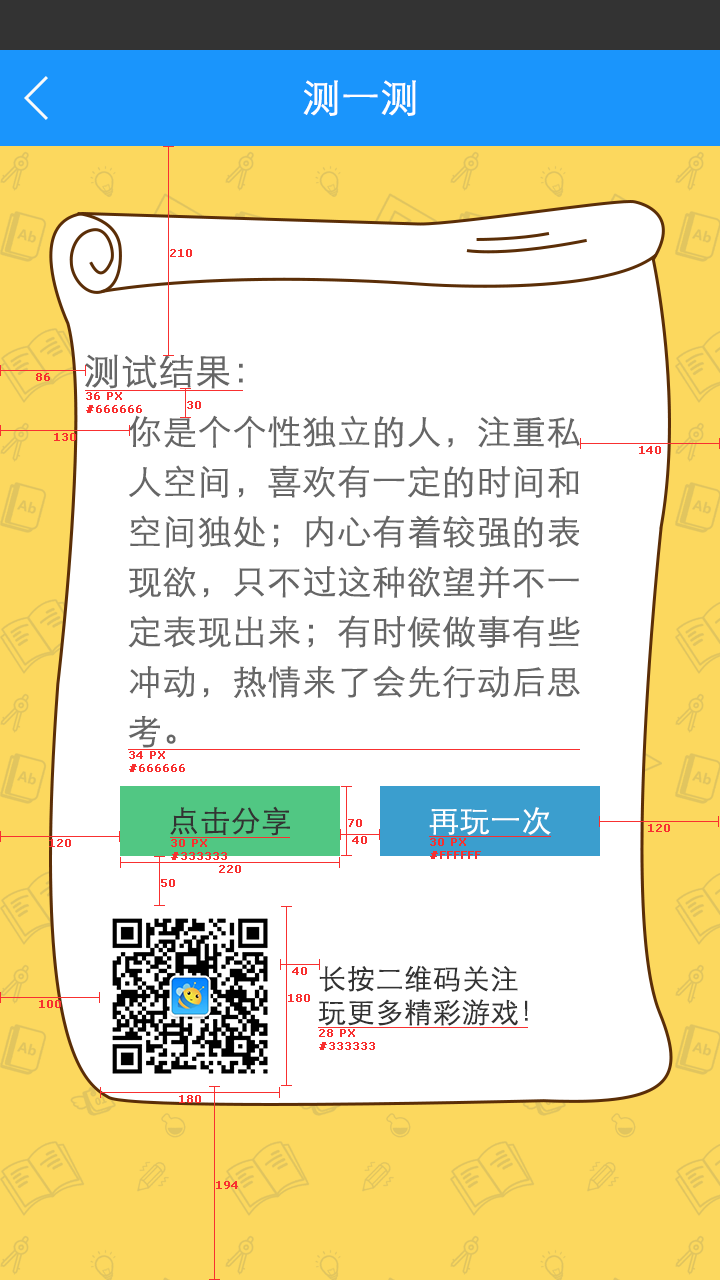
<style>
.page{position:relative;width:720px;height:1280px;background:#ffffff}
.page>*{position:absolute;margin:0}
.t1{font:38px "STXihei";color:#ffffff;font-weight:bold}
.t2{font:11px "Verdana";color:#f83030;font-weight:bold}
.t3{font:36px "STXihei";color:#666666;font-weight:bold}
.t4{font:34px/50px "STXihei";color:#666666;font-weight:bold}
.t5{font:30px "STXihei";color:#333333;font-weight:bold}
.t6{font:30px "STXihei";color:#ffffff;font-weight:bold}
.t7{font:28px "STXihei";color:#333333;font-weight:bold}
</style>
<div class="page">
<p class="t1" style="left:303px;top:80px;width:113px;height:36px">测一测</p>
<p class="t2" style="left:170px;top:249px;width:22px;height:8px">210</p>
<p class="t3" style="left:85px;top:354px;width:158px;height:35px">测试结果：</p>
<p class="t2" style="left:36px;top:373px;width:14px;height:8px">86</p>
<p class="t2" style="left:86px;top:392px;width:56px;height:21px">36 PX<br>#666666</p>
<p class="t2" style="left:187px;top:401px;width:14px;height:8px">30</p>
<p class="t4" style="left:128px;top:415px;width:452px;height:333px">你是个个性独立的人，注重私<br>人空间，喜欢有一定的时间和<br>空间独处；内心有着较强的表<br>现欲，只不过这种欲望并不一<br>定表现出来；有时候做事有些<br>冲动，热情来了会先行动后思<br>考。</p>
<p class="t2" style="left:54px;top:433px;width:22px;height:8px">130</p>
<p class="t2" style="left:639px;top:446px;width:22px;height:8px">140</p>
<p class="t2" style="left:129px;top:751px;width:56px;height:21px">34 PX<br>#666666</p>
<p class="t5" style="left:170px;top:806px;width:120px;height:30px">点击分享</p>
<p class="t6" style="left:429px;top:807px;width:122px;height:28px">再玩一次</p>
<p class="t2" style="left:348px;top:819px;width:14px;height:8px">70</p>
<p class="t2" style="left:648px;top:824px;width:22px;height:8px">120</p>
<p class="t2" style="left:49px;top:839px;width:22px;height:8px">120</p>
<p class="t2" style="left:171px;top:839px;width:56px;height:21px">30 PX<br>#333333</p>
<p class="t2" style="left:171px;top:839px;width:56px;height:21px">30 PX<br>#333333</p>
<p class="t2" style="left:352px;top:836px;width:15px;height:8px">40</p>
<p class="t2" style="left:430px;top:838px;width:51px;height:21px">30 PX<br>#FFFFFF</p>
<p class="t2" style="left:219px;top:865px;width:22px;height:8px">220</p>
<p class="t2" style="left:161px;top:879px;width:14px;height:8px">50</p>
<p class="t7" style="left:318px;top:965px;width:210px;height:61px">长按二维码关注<br>玩更多精彩游戏！</p>
<p class="t2" style="left:292px;top:967px;width:15px;height:8px">40</p>
<p class="t2" style="left:39px;top:1000px;width:22px;height:8px">100</p>
<p class="t2" style="left:288px;top:994px;width:22px;height:8px">180</p>
<p class="t2" style="left:319px;top:1029px;width:56px;height:21px">28 PX<br>#333333</p>
<p class="t2" style="left:179px;top:1095px;width:22px;height:8px">180</p>
<p class="t2" style="left:216px;top:1181px;width:22px;height:8px">194</p>
</div>
